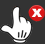
<style>
.page{position:relative;width:45px;height:44px;background:#333333}
.page>*{position:absolute;margin:0}
.t1{font:16px "Arial-Black";color:#ffffff}
</style>
<div class="page">
<p class="t1" style="left:31px;top:8px;width:11px;height:9px">x</p>
</div>
